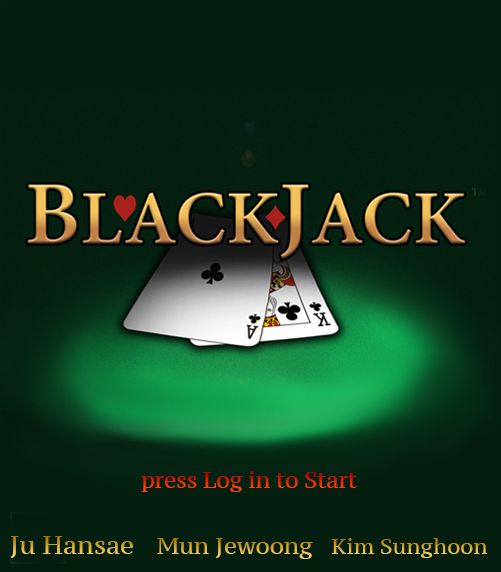
<style>
.page{position:relative;width:501px;height:572px;background:#041f10}
.page>*{position:absolute;margin:0}
.t1{font:21.6px "PTSerif-Caption"}
.t2{font:24.9px "PTSerif-Caption"}
.t3{font:22.8px "PTSerif-Caption"}
.t4{font:21.2px "PTSerif-Caption"}
</style>
<div class="page">
<p class="t1" style="left:141px;top:471px;width:216px;height:21px">press Log in to Start</p>
<p class="t2" style="left:10px;top:536px;width:123px;height:22px">Ju Hansae</p>
<p class="t3" style="left:157px;top:538px;width:156px;height:21px">Mun Jewoong</p>
<p class="t4" style="left:331px;top:538px;width:157px;height:20px">Kim Sunghoon</p>
</div>
